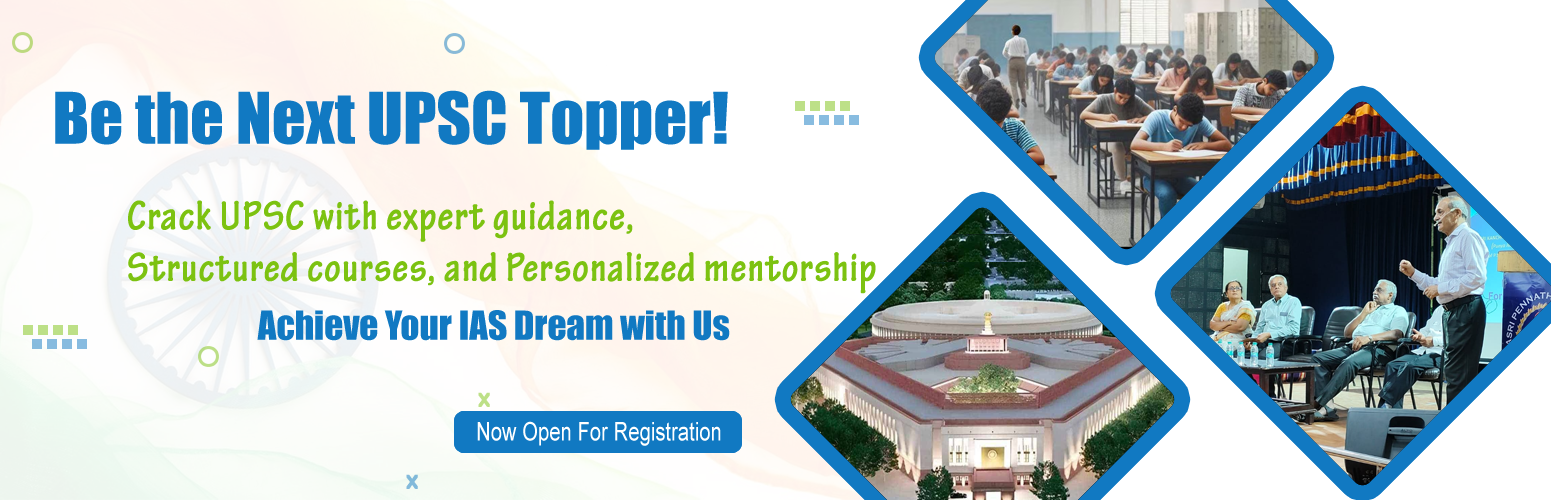
<style>
.page{position:relative;width:1551px;height:500px;background:#ffffff}
.page>*{position:absolute;margin:0}
.t1{font:65.8px "Impact";color:#1179c2}
.t2{font:43px "TektonPro-BoldCond";color:#7cc211;font-weight:bold}
.t3{font:37px "Impact";color:#1179c2}
.t4{font:20.7px "BerlinSansFBDemi-Bold";color:#bde087}
.t5{font:25.8px "ArialMT";color:#ffffff;scale:0.78 1}
.t6{font:20.7px "BerlinSansFBDemi-Bold";color:#82bada}
</style>
<div class="page">
<p class="t1" style="left:55px;top:90px;width:673px;height:60px">Be the Next UPSC Topper!</p>
<p class="t2" style="left:128px;top:200px;width:748px;height:94px">Crack UPSC with expert guidance,<br>Structured courses, and Personalized mentorship</p>
<p class="t3" style="left:257px;top:310px;width:473px;height:31px">Achieve Your IAS Dream with Us</p>
<p class="t4" style="left:478px;top:392px;width:12px;height:15px">X</p>
<p class="t5" style="left:477px;top:421px;width:244px;height:25px">Now Open For Registration</p>
<p class="t6" style="left:406px;top:474px;width:12px;height:15px">X</p>
</div>
